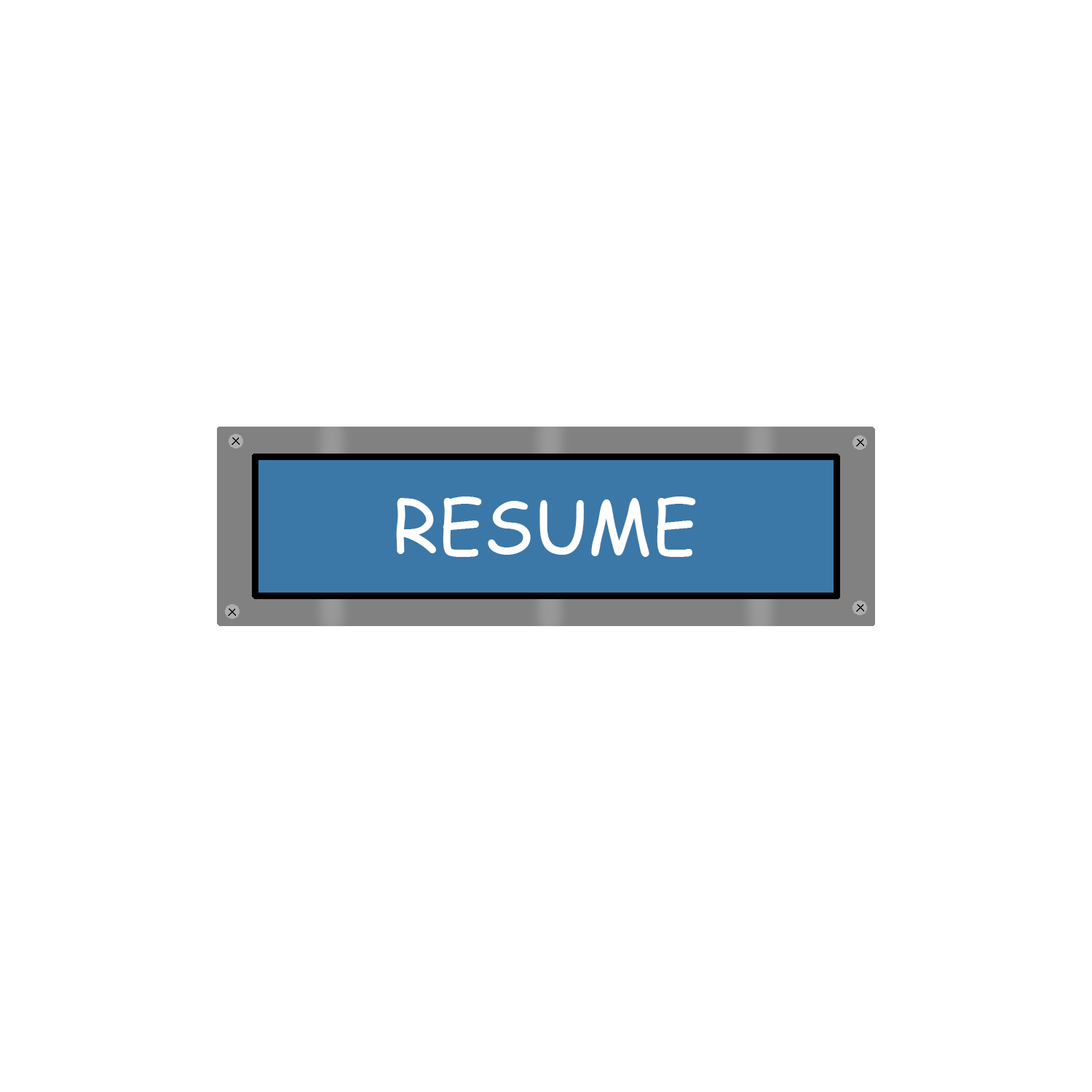
<style>
.page{position:relative;width:1092px;height:1092px;background:#ffffff}
.page>*{position:absolute;margin:0}
.t1{font:72.8px "ComicSansMS";color:#ffffff}
</style>
<div class="page">
<p class="t1" style="left:396px;top:496px;width:300px;height:61px">RESUME</p>
</div>
